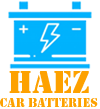
<style>
.page{position:relative;width:100px;height:109px;background:#ffffff}
.page>*{position:absolute;margin:0}
.t1{font:11.7px "StencilStd";color:#fda100}
.t2{font:29.2px "StencilStd";color:#fda100}
</style>
<div class="page">
<p class="t1" style="left:0px;top:71px;width:98px;height:36px;text-align:center"><span class="t2">HAEZ<br></span>CAr Batteries</p>
</div>
